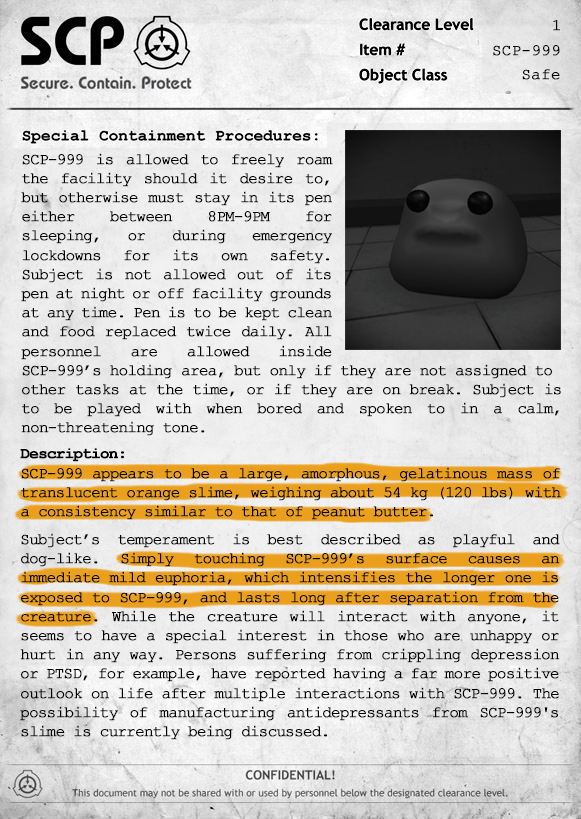
<style>
.page{position:relative;width:581px;height:819px}
.page>*{position:absolute;margin:0}
.t1{font:16px "CourierNewPSMT";letter-spacing:-0.01em;color:#000000;text-transform:uppercase;font-weight:bold}
.t2{font:16px "CourierNewPSMT";letter-spacing:-0.01em;color:#000000;font-weight:bold}
.t3{font:16px "CourierNewPSMT";letter-spacing:-0.075em;color:#000000;font-weight:bold}
.t4{font:16px "CourierNewPS-BoldMT";letter-spacing:-0.075em;color:#000000;font-weight:bold}
</style>
<div class="page">
<p class="t1" style="left:553px;top:20px;width:7px;height:11px">1</p>
<p class="t1" style="left:493px;top:45px;width:67px;height:11px">SCp-999</p>
<p class="t2" style="left:522px;top:69px;width:38px;height:11px">Safe</p>
<p class="t3" style="left:21px;top:153px;width:312px;height:226px;text-align:justify">SCP-999 is allowed to freely roam the facility should it desire to, but otherwise must stay in its pen either between 8PM-9PM for sleeping, or during emergency lockdowns for its own safety. Subject is not allowed out of its pen at night or off facility grounds at any time. Pen is to be kept clean and food replaced twice daily. All personnel are allowed inside SCP-999’s holding</p>
<p class="t3" style="left:182px;top:364px;width:370px;height:15px">area, but only if they are not assigned to</p>
<p class="t3" style="left:21px;top:383px;width:540px;height:53px;text-align:justify">other tasks at the time, or if they are on break. Subject is to be played with when bored and spoken to in a calm, non-threatening tone.</p>
<p class="t3" style="left:20px;top:448px;width:541px;height:72px;text-align:justify"><span class="t4">Description: <br></span>SCP-999 appears to be a large, amorphous, gelatinous mass of translucent orange slime, weighing about 54 kg (120 lbs) with a consistency similar to that of peanut butter.</p>
<p class="t3" style="left:20px;top:533px;width:540px;height:207px;text-align:justify">Subject’s temperament is best described as playful and dog-like. Simply touching SCP-999’s surface causes an immediate mild euphoria, which intensifies the longer one is exposed to SCP-999, and lasts long after separation from the creature. While the creature will interact with anyone, it seems to have a special interest in those who are unhappy or hurt in any way. Persons suffering from crippling depression or PTSD, for example, have reported having a far more positive outlook on life after multiple interactions with SCP-999. The possibility of manufacturing antidepressants from SCP-999's slime is currently being discussed.</p>
</div>
